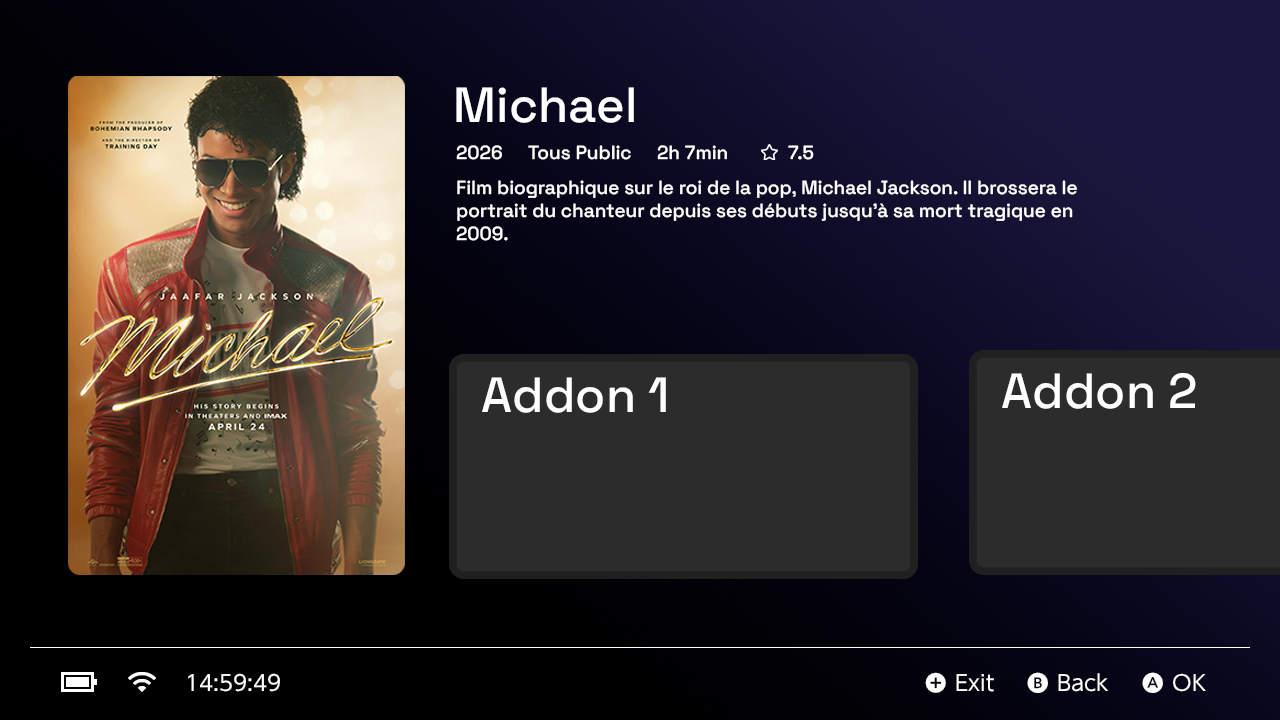
<style>
.page{position:relative;width:1280px;height:720px}
.page>*{position:absolute;margin:0}
.t1{font:49.1px "SpaceGrotesk-Medium";color:#ffffff}
.t2{font:19px "SpaceGrotesk-Medium";color:#ffffff}
</style>
<div class="page">
<p class="t1" style="left:456px;top:87px;width:178px;height:36px">Michael</p>
<p class="t2" style="left:456px;top:145px;width:46px;height:15px">2026</p>
<p class="t2" style="left:528px;top:145px;width:103px;height:15px">Tous Public</p>
<p class="t2" style="left:657px;top:145px;width:70px;height:15px">2h 7min</p>
<p class="t2" style="left:788px;top:145px;width:26px;height:15px">7.5</p>
<p class="t2" style="left:456px;top:180px;width:621px;height:61px">Film biographique sur le roi de la pop, Michael Jackson. Il brossera le portrait du chanteur depuis ses débuts jusqu'à sa mort tragique en 2009.</p>
<p class="t1" style="left:482px;top:377px;width:184px;height:36px">Addon 1</p>
<p class="t1" style="left:1002px;top:373px;width:194px;height:36px">Addon 2</p>
</div>
